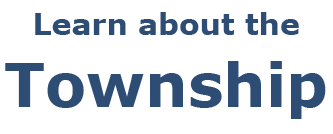
<style>
.page{position:relative;width:333px;height:134px;background:#ffffff}
.page>*{position:absolute;margin:0}
.t1{font:30px "Verdana-Bold";color:#2d4d74}
.t2{font:60px "Verdana-Bold";color:#2d4d74}
</style>
<div class="page">
<p class="t1" style="left:5px;top:12px;width:321px;height:107px;text-align:center">Learn about the<br><span class="t2">Township</span></p>
</div>
